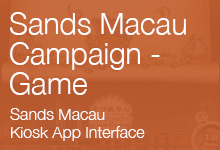
<style>
.page{position:relative;width:220px;height:150px}
.page>*{position:absolute;margin:0}
.t1{font:30px/30px "HelveticaNeue-Light";color:#ffffff}
.t2{font:16px/18px "HelveticaNeue-Light";color:#ffffff}
</style>
<div class="page">
<p class="t1" style="left:10px;top:12px;width:176px;height:83px">Sands Macau <br>Campaign -<br>Game</p>
<p class="t2" style="left:10px;top:108px;width:135px;height:33px">Sands Macau<br>Kiosk App Interface</p>
</div>
